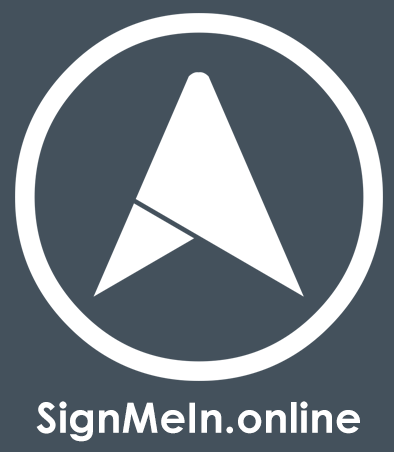
<style>
.page{position:relative;width:394px;height:452px;background:#44515c}
.page>*{position:absolute;margin:0}
.t1{font:41.7px "CenturyGothic-Bold";letter-spacing:0.01em;color:#ffffff}
</style>
<div class="page">
<p class="t1" style="left:36px;top:401px;width:324px;height:41px">SignMeIn.online</p>
</div>
